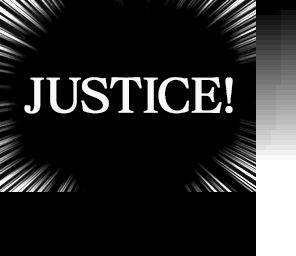
<style>
.page{position:relative;width:296px;height:256px;background:#000000}
.page>*{position:absolute;margin:0}
.t1{font:46px "MatisseVPro-DB";letter-spacing:-0.025em;color:#f8f8f8;font-weight:bold}
</style>
<div class="page">
<p class="t1" style="left:24px;top:77px;width:209px;height:37px">JUSTICE!</p>
</div>
